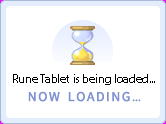
<style>
.page{position:relative;width:166px;height:124px;background:#ffffff}
.page>*{position:absolute;margin:0}
.t1{font:12px "MyriadPro-Regular";color:#000000}
</style>
<div class="page">
<p class="t1" style="left:13px;top:74px;width:142px;height:11px">Rune Tablet is being loaded...</p>
</div>
